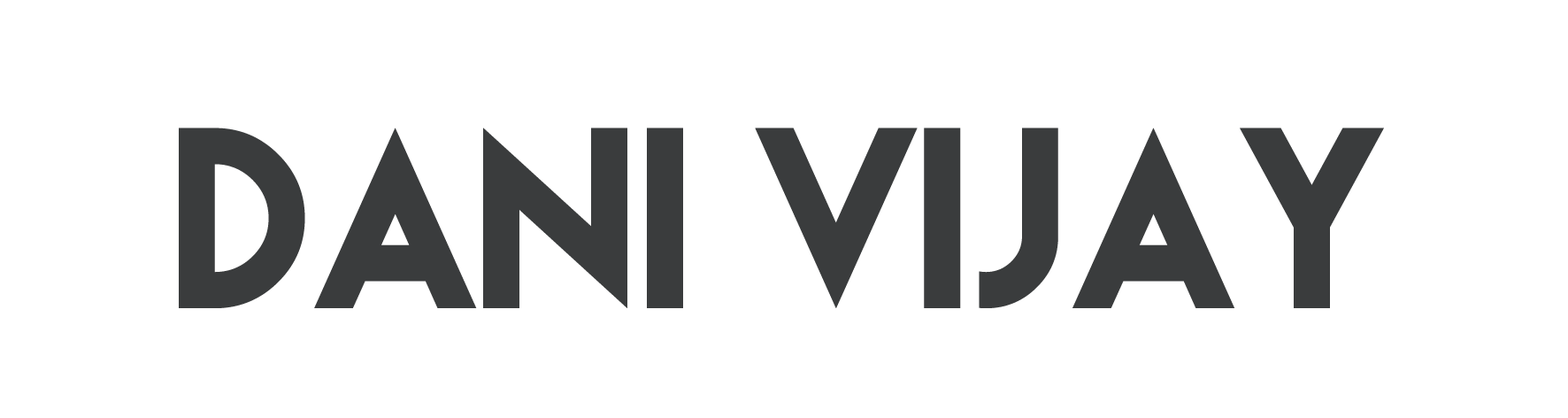
<style>
.page{position:relative;width:1568px;height:418px;background:#ffffff}
.page>*{position:absolute;margin:0}
.t1{font:228.6px "LemonMilk";color:#3a3c3d}
</style>
<div class="page">
<p class="t1" style="left:179px;top:127px;width:1205px;height:181px">DAni Vijay</p>
</div>
